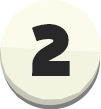
<style>
.page{position:relative;width:101px;height:109px;background:#fcfbeb}
.page>*{position:absolute;margin:0}
.t1{font:72px "MovaviGrotesqueBlack";color:#282828}
</style>
<div class="page">
<p class="t1" style="left:32px;top:24px;width:38px;height:52px">2</p>
</div>
